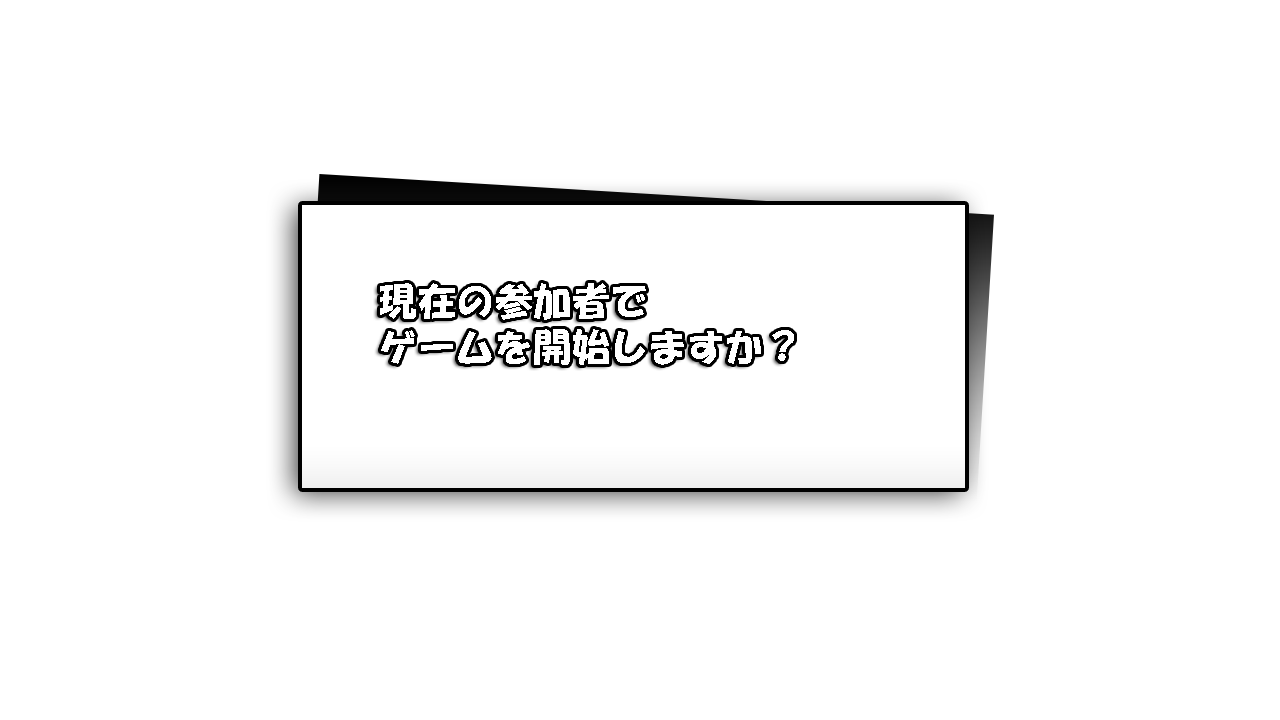
<style>
.page{position:relative;width:1280px;height:720px;background:#ffffff}
.page>*{position:absolute;margin:0}
.t1{font:38px "HGSSoeiKakupoptai";color:#ffffff}
</style>
<div class="page">
<p class="t1" style="left:380px;top:283px;width:414px;height:82px">現在の参加者で<br>ゲームを開始しますか？</p>
</div>
